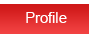
<style>
.page{position:relative;width:89px;height:40px;background:#ffffff}
.page>*{position:absolute;margin:0}
.t1{font:14.7px "ArialMT";color:#ffffff}
</style>
<div class="page">
<p class="t1" style="left:26px;top:12px;width:41px;height:11px">Profile</p>
</div>
